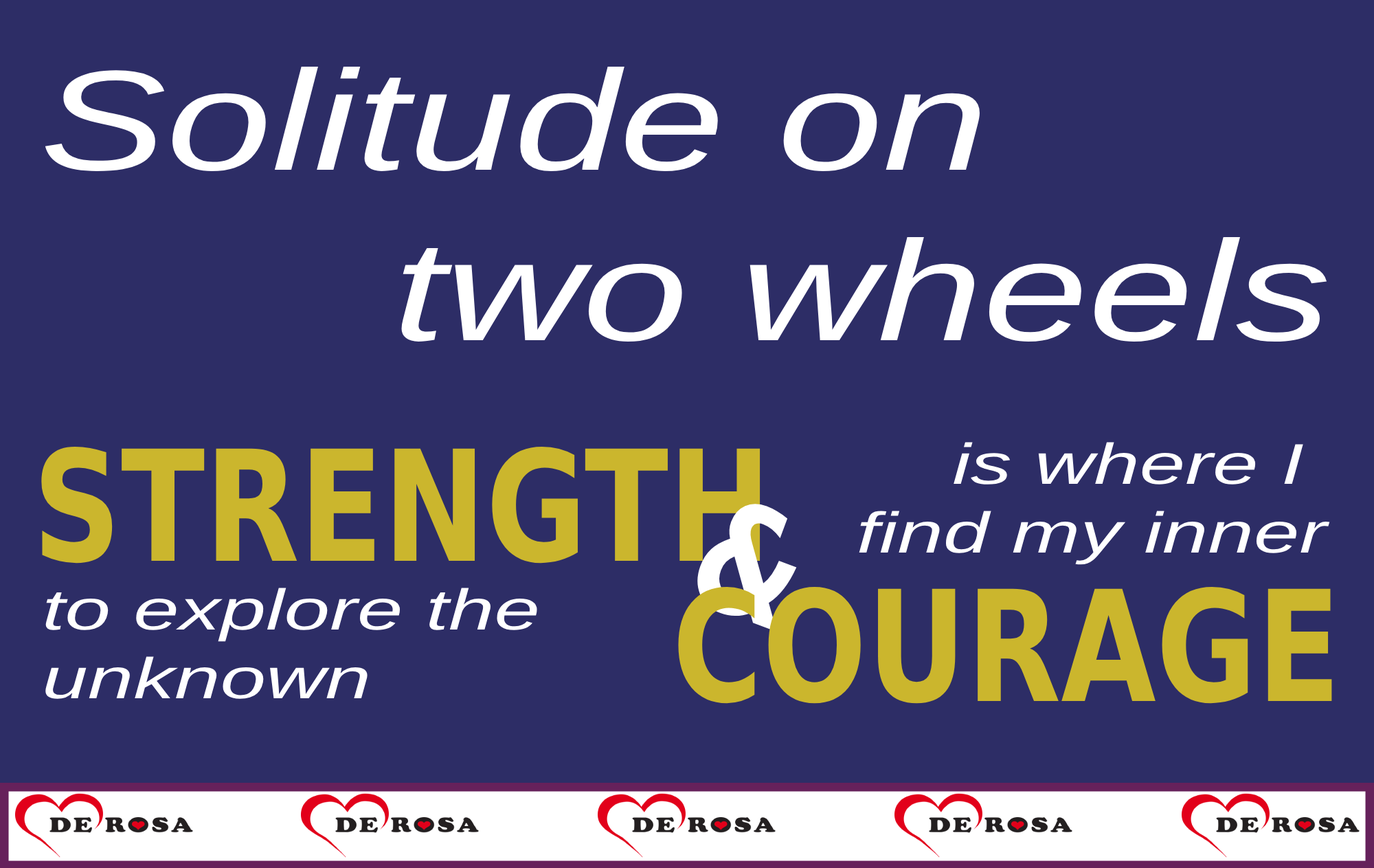
<style>
.page{position:relative;width:1374px;height:868px;background:#2d2d66}
.page>*{position:absolute;margin:0}
.t1{font:142.3px "Arial-ItalicMT";color:#ffffff;scale:1.33 1}
.t2{font:153.8px "Arial-Black";color:#cbb62d;scale:0.8 1}
.t3{font:57.4px "Arial-ItalicMT";color:#ffffff;scale:1.43 1}
.t4{font:153.8px "Arial-Black";color:#ffffff;scale:0.8 1}
</style>
<div class="page">
<p class="t1" style="left:45px;top:66px;width:935px;height:106px">Solitude on</p>
<p class="t1" style="left:401px;top:237px;width:926px;height:104px">two wheels</p>
<p class="t2" style="left:41px;top:446px;width:720px;height:117px">STRENGTH</p>
<p class="t3" style="left:859px;top:442px;width:471px;height:123px;text-align:right">is where I <br>find my inner</p>
<p class="t4" style="left:695px;top:502px;width:102px;height:130px;rotate:20deg">&amp;</p>
<p class="t3" style="left:45px;top:587px;width:492px;height:112px">to explore the<br>unknown</p>
<p class="t2" style="left:678px;top:586px;width:654px;height:118px">COURAGE</p>
</div>
